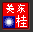
<style>
.page{position:relative;width:33px;height:32px;background:#f20000}
.page>*{position:absolute;margin:0}
.t1{font:10.4px "SimSun";color:#ffffff}
.t2{font:11.7px "SimSun";color:#ffffff}
</style>
<div class="page">
<p class="t1" style="left:6px;top:4px;width:19px;height:9px">美东</p>
<p class="t2" style="left:16px;top:15px;width:11px;height:12px">桂</p>
</div>
